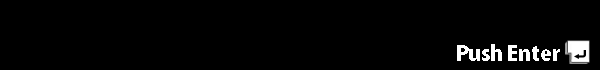
<style>
.page{position:relative;width:600px;height:70px;background:#000000}
.page>*{position:absolute;margin:0}
.t1{font:20.7px "KozGoPr6N-Heavy";color:#ffffff}
</style>
<div class="page">
<p class="t1" style="left:457px;top:44px;width:103px;height:17px">Push Enter</p>
</div>
